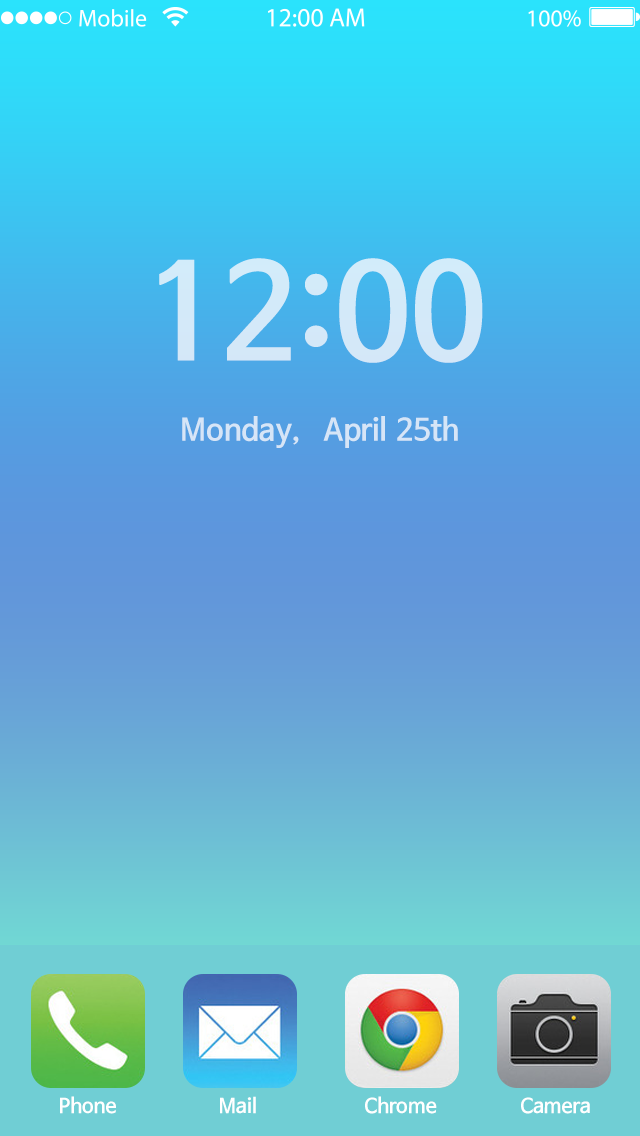
<style>
.page{position:relative;width:640px;height:1136px}
.page>*{position:absolute;margin:0}
.t1{font:130px "NanumBarunGothicBold";color:#d3e9f9}
.t2{font:30px "NanumBarunGothicBold";color:#d6e5f7}
.t3{font:20px "NanumBarunGothicBold";color:#ffffff}
</style>
<div class="page">
<p class="t1" style="left:159px;top:258px;width:324px;height:105px">12:00</p>
<p class="t2" style="left:182px;top:416px;width:276px;height:32px">Monday, April 25th</p>
<p class="t3" style="left:60px;top:1096px;width:56px;height:18px">Phone</p>
<p class="t3" style="left:220px;top:1096px;width:36px;height:18px">Mail</p>
<p class="t3" style="left:365px;top:1096px;width:72px;height:18px">Chrome</p>
<p class="t3" style="left:521px;top:1097px;width:69px;height:17px">Camera</p>
</div>
